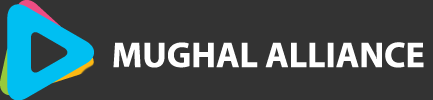
<style>
.page{position:relative;width:433px;height:100px;background:#333333}
.page>*{position:absolute;margin:0}
.t1{font:36px "MyriadPro-Bold";color:#ffffff}
</style>
<div class="page">
<p class="t1" style="left:113px;top:42px;width:311px;height:26px">MUGHAL ALLIANCE</p>
</div>
